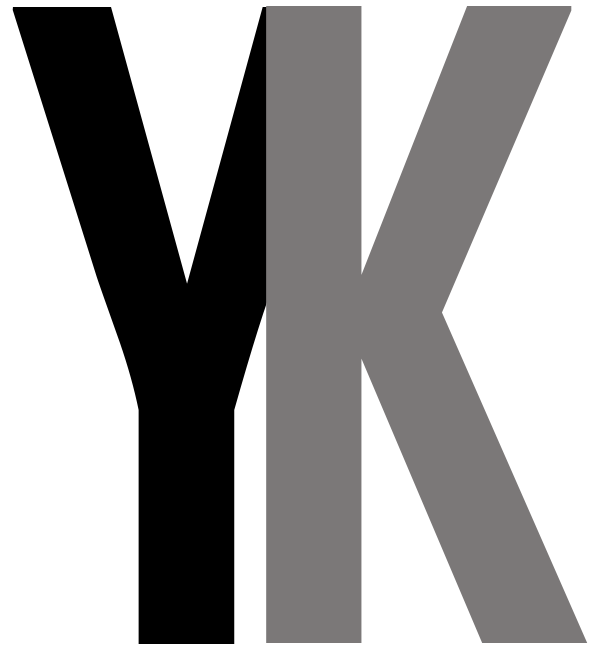
<style>
.page{position:relative;width:600px;height:650px;background:#ffffff}
.page>*{position:absolute;margin:0}
.t1{font:833.3px "AgencyFB-Bold";color:#7b7878}
.t2{font:833.3px "AgencyFB-Bold";color:#000000}
</style>
<div class="page">
<p class="t1" style="left:266px;top:6px;width:322px;height:637px">K</p>
<p class="t2" style="left:12px;top:7px;width:349px;height:637px">Y</p>
</div>
